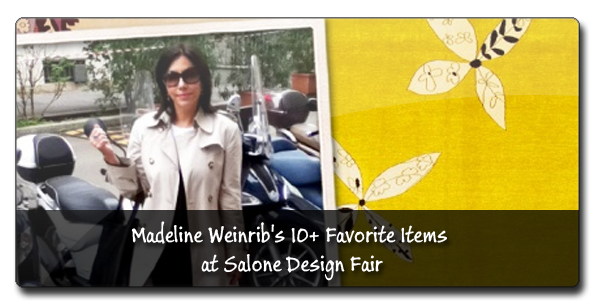
<style>
.page{position:relative;width:600px;height:307px}
.page>*{position:absolute;margin:0}
.t1{font:24px "BuxtonSketch";color:#ffffff}
</style>
<div class="page">
<p class="t1" style="left:131px;top:221px;width:316px;height:60px;text-align:center">Madeline Weinrib's 10+ Favorite Items <br>at Salone Design Fair</p>
</div>
